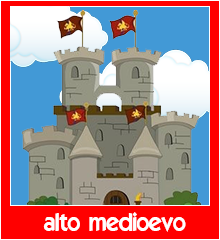
<style>
.page{position:relative;width:220px;height:240px;background:#ff0000}
.page>*{position:absolute;margin:0}
.t1{font:24px "ELEGANCE";color:#ffffff}
</style>
<div class="page">
<p class="t1" style="left:43px;top:212px;width:143px;height:20px">alto medioevo</p>
</div>
